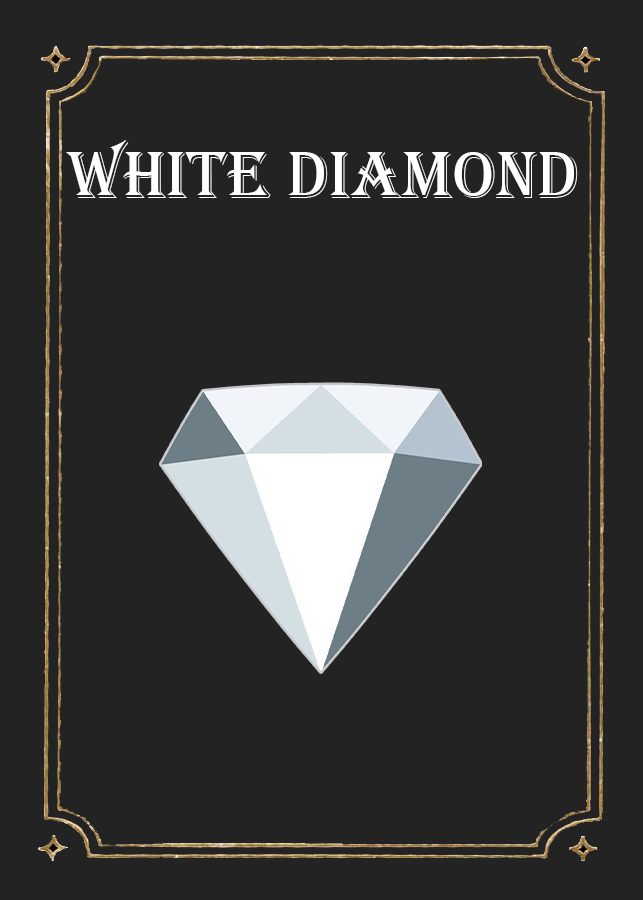
<style>
.page{position:relative;width:643px;height:900px;background:#232323}
.page>*{position:absolute;margin:0}
.t1{font:69px "Algerian";color:#ffffff}
</style>
<div class="page">
<p class="t1" style="left:66px;top:140px;width:512px;height:58px">white diamond</p>
</div>
